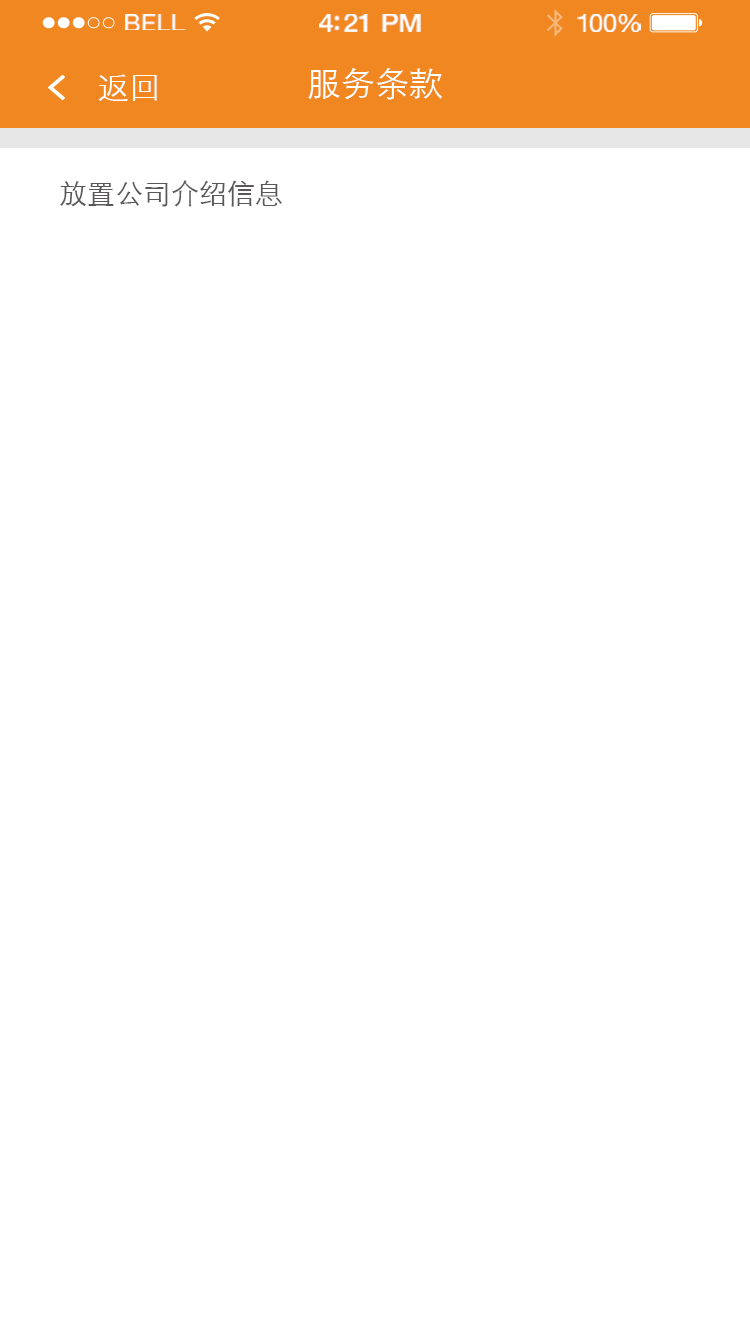
<style>
.page{position:relative;width:750px;height:1334px;background:#ffffff}
.page>*{position:absolute;margin:0}
.t1{font:23.3px "HelveticaNeue";letter-spacing:0.02em;color:#ffffff;scale:1.06 1}
.t2{font:25.3px "HelveticaNeue-Medium";letter-spacing:-0.02em;color:#ffffff;scale:1.06 1}
.t3{font:24.3px "HelveticaNeue";letter-spacing:-0.02em;color:#ffffff;scale:1.06 1}
.t4{font:32px "STXihei";color:#ffffff}
.t5{font:34px "STXihei";color:#ffffff}
.t6{font:28px "STXihei";color:#595757}
</style>
<div class="page">
<p class="t1" style="left:125px;top:14px;width:61px;height:16px">BELL</p>
<p class="t2" style="left:319px;top:14px;width:102px;height:18px">4:21 PM</p>
<p class="t3" style="left:577px;top:14px;width:64px;height:18px">100%</p>
<p class="t4" style="left:98px;top:74px;width:59px;height:27px">返回</p>
<p class="t5" style="left:308px;top:68px;width:135px;height:32px">服务条款</p>
<p class="t6" style="left:60px;top:180px;width:222px;height:27px">放置公司介绍信息</p>
</div>
